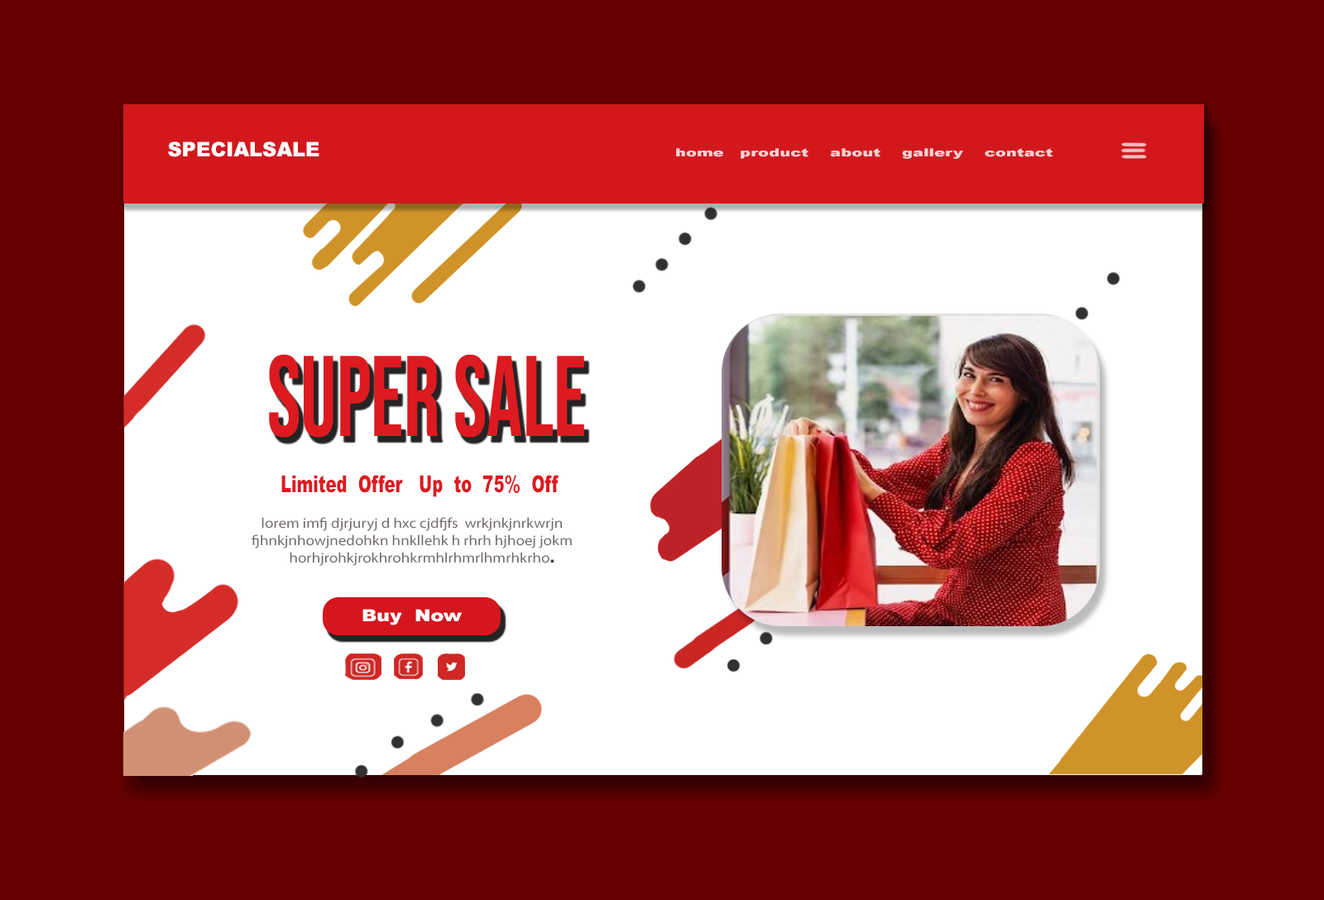
<style>
.page{position:relative;width:1324px;height:900px;background:#670001}
.page>*{position:absolute;margin:0}
.t1{font:19.9px "Arial-Black";color:#ffffff}
.t2{font:10.9px "Arial-Black";color:#f3d2d3;scale:1.48 1}
.t3{font:114.3px "BebasNeue-Regular";color:#dd1a20;scale:0.78 1}
.t4{font:23.5px "Arial-Black";color:#dd1a20;scale:0.69 1}
.t5{font:14.2px "MyriadPro-Regular";color:#736c6c;scale:1.1 1}
.t6{font:14.2px "Arial-Black";color:#3f3e3e;scale:1.1 1}
.t7{font:16.3px "Arial-Black";color:#ffffff;scale:1.19 1}
</style>
<div class="page">
<p class="t1" style="left:168px;top:142px;width:151px;height:15px">SPECIALSALE</p>
<p class="t2" style="left:676px;top:148px;width:377px;height:11px">home   product    about    gallery    contact</p>
<p class="t3" style="left:269px;top:354px;width:315px;height:84px">SUPER SALE</p>
<p class="t4" style="left:281px;top:475px;width:278px;height:22px">Limited  Offer   Up  to  75%  Off</p>
<p class="t5" style="left:252px;top:517px;width:320px;height:49px;text-align:center">lorem imfj djrjuryj d hxc cjdfjfs  wrkjnkjnrkwrjn<br>fjhnkjnhowjnedohkn hnkllehk h rhrh hjhoej jokm<br>      horhjrohkjrokhrohkrmhlrhmrlhmrhkrho<span class="t6">.</span></p>
<p class="t7" style="left:363px;top:609px;width:99px;height:17px">Buy  Now</p>
</div>
